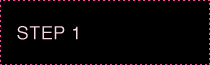
<style>
.page{position:relative;width:210px;height:65px;background:#000000}
.page>*{position:absolute;margin:0}
.t1{font:18px "Helvetica";letter-spacing:0.025em;color:#fbd7e7}
</style>
<div class="page">
<p class="t1" style="left:17px;top:26px;width:61px;height:14px">STEP 1</p>
</div>
